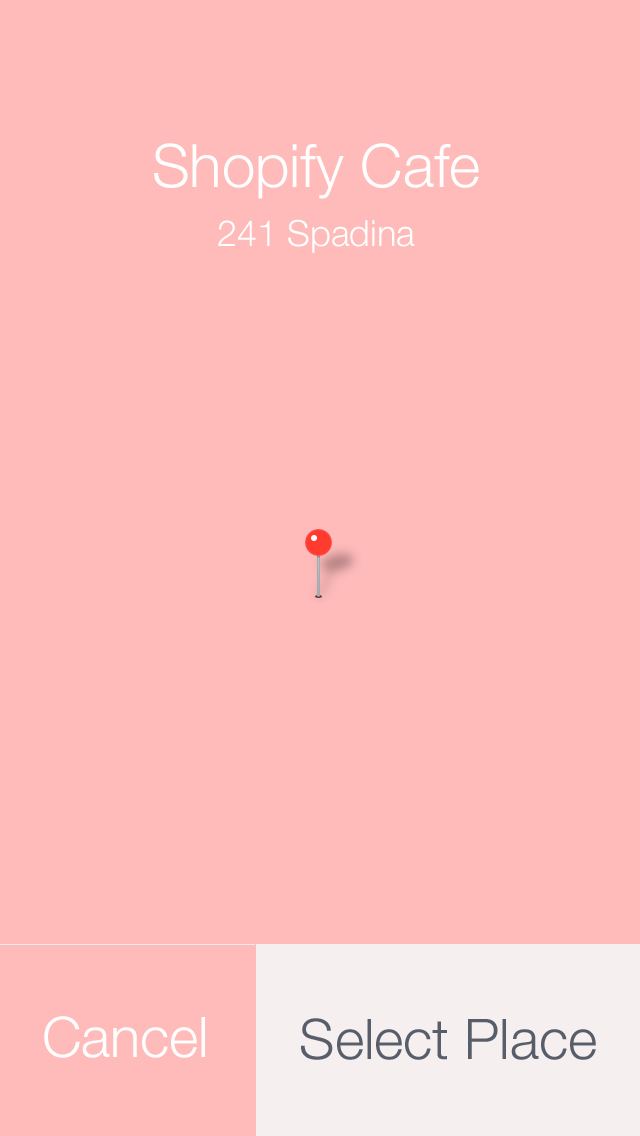
<style>
.page{position:relative;width:640px;height:1136px;background:#ffbaba}
.page>*{position:absolute;margin:0}
.t1{font:60px "HelveticaNeue-Light";color:#ffffff}
.t2{font:36px "HelveticaNeue-Light";color:#ffffff}
.t3{font:56px "HelveticaNeue-Light";color:#ffffff}
.t4{font:56px "HelveticaNeue-Light";color:#585e69}
</style>
<div class="page">
<p class="t1" style="left:154px;top:143px;width:325px;height:110px;text-align:center">Shopify Cafe<br><span class="t2">241 Spadina</span></p>
<p class="t3" style="left:44px;top:1016px;width:161px;height:42px">Cancel</p>
<p class="t4" style="left:301px;top:1018px;width:295px;height:42px">Select Place</p>
</div>
